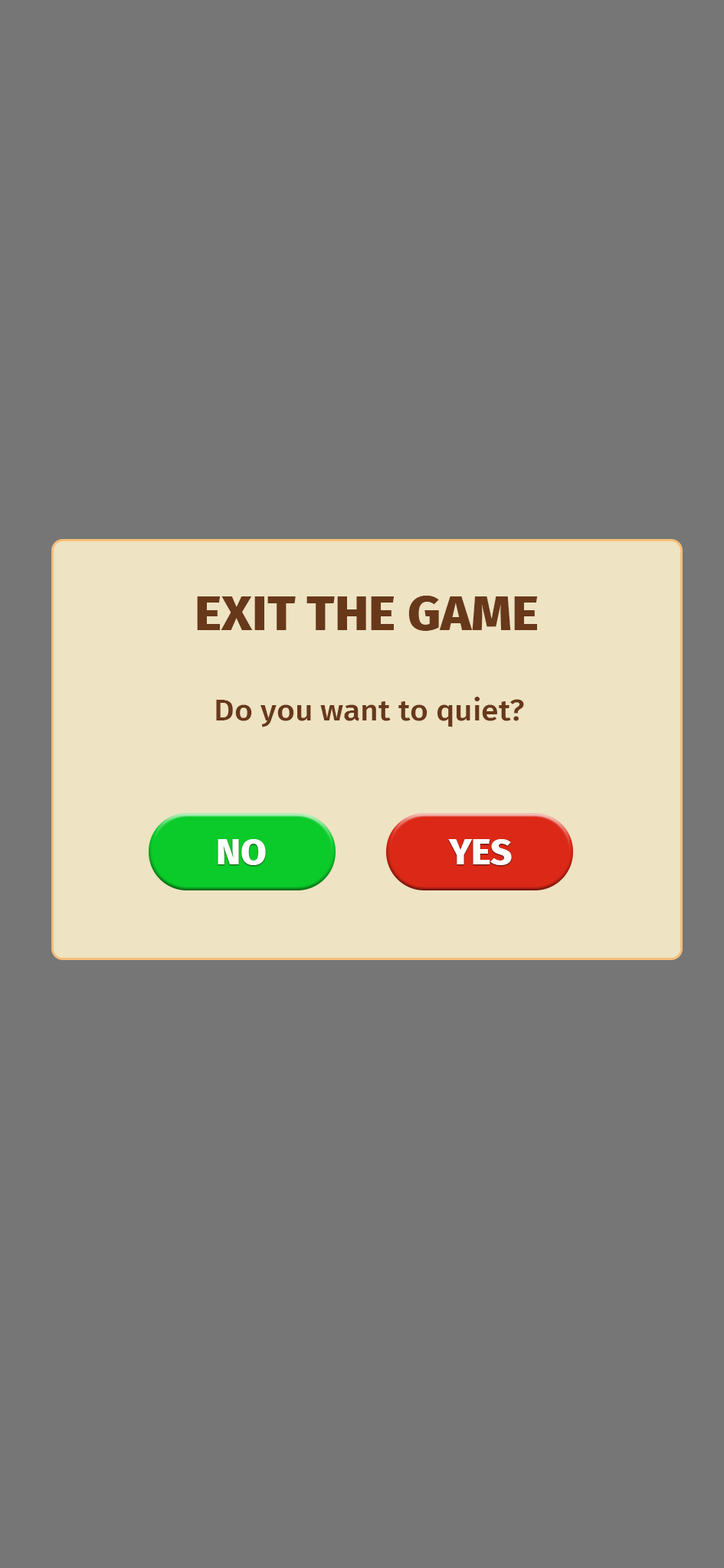
<style>
.page{position:relative;width:724px;height:1568px;background:#767676}
.page>*{position:absolute;margin:0}
.t1{font:48.7px "FiraSans-ExtraBold";color:#68381a;scale:1.05 1}
.t2{font:29.8px "FiraSans-Medium";color:#68381a;scale:1.05 1}
.t3{font:35.6px "FiraSans-ExtraBold";color:#ffffff;scale:1.05 1}
</style>
<div class="page">
<p class="t1" style="left:197px;top:596px;width:340px;height:35px">EXIT THE GAME</p>
<p class="t2" style="left:216px;top:697px;width:308px;height:30px">Do you want to quiet?</p>
<p class="t3" style="left:217px;top:839px;width:49px;height:26px">NO</p>
<p class="t3" style="left:448px;top:839px;width:63px;height:26px">YES</p>
</div>
